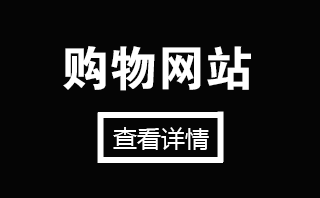
<style>
.page{position:relative;width:320px;height:198px;background:#050505}
.page>*{position:absolute;margin:0}
.t1{font:48px "FZDHTJW--GB1-0";color:#ffffff}
.t2{font:24px "MicrosoftYaHei";color:#ffffff}
</style>
<div class="page">
<p class="t1" style="left:63px;top:46px;width:188px;height:45px">购物网站</p>
<p class="t2" style="left:113px;top:127px;width:96px;height:23px">查看详情</p>
</div>
